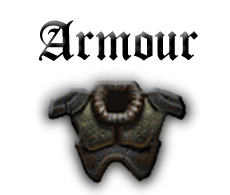
<style>
.page{position:relative;width:230px;height:195px;background:#ffffff}
.page>*{position:absolute;margin:0}
.t1{font:60px "Oldchristmas-Regular";color:#000000}
</style>
<div class="page">
<p class="t1" style="left:39px;top:20px;width:159px;height:41px">Armour</p>
</div>
